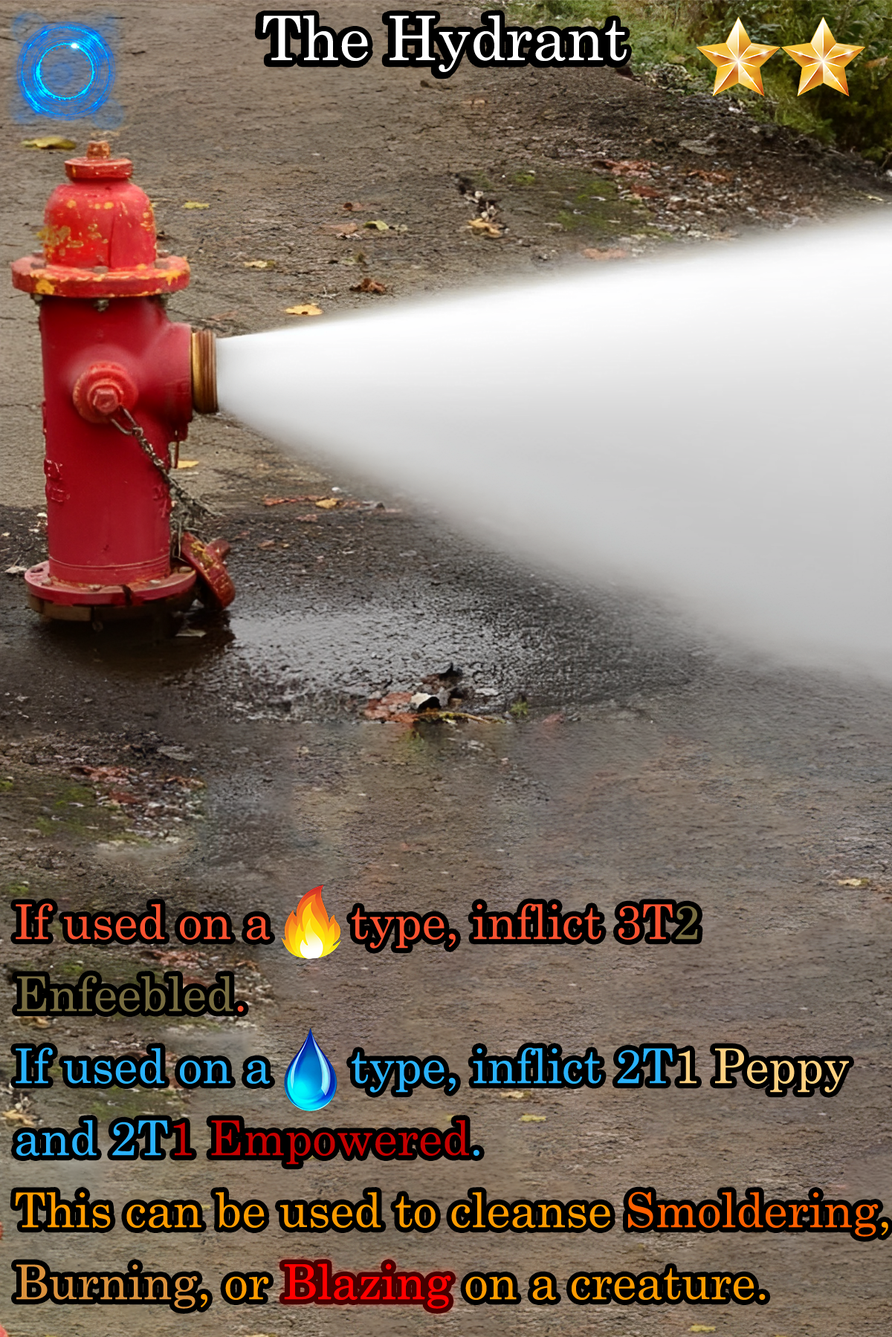
<style>
.page{position:relative;width:892px;height:1337px}
.page>*{position:absolute;margin:0}
.t1{font:104.8px "Century";color:#ffffff}
.t2{font:81.7px/72.1px "Century";color:#fb5230}
.t3{font:81.7px/72.1px "Century";color:#776c40}
.t4{font:81.7px/72.1px "Century";color:#29b2fb}
.t5{font:81.7px/72.1px "Century";color:#fed181}
.t6{font:81.7px/72.1px "Century";color:#c50000}
.t7{font:81.7px/72.1px "Century";color:#ff9c00}
.t8{font:81.7px/72.1px "Century";color:#ff6000}
.t9{font:81.7px/72.1px "Century";color:#db923d}
.t10{font:81.7px/72.1px "Century";color:#ff0000}
.t11{font:81.7px "Century";color:#ff0000}
</style>
<div class="page">
<p class="t1" style="left:262px;top:15px;width:364px;height:57px">The Hydrant</p>
<p class="t2" style="left:15px;top:903px;width:873px;height:406px">If used on a      type, inflict 3T<span class="t3">2 Enfeebled</span>.<br><span class="t4">If used on a      type, inflict 2T</span><span class="t5">1 Peppy </span><span class="t4">and 2T</span><span class="t6">1 Empowered</span><span class="t4">.<br></span><span class="t7">This can be used to cleanse </span><span class="t8">Smoldering</span><span class="t7">, </span><span class="t9">Burning</span><span class="t7">, or </span><span class="t10">Blazing</span><span class="t7"> on a creature.</span></p>
<p class="t11" style="left:285px;top:1264px;width:166px;height:44px">Blazing</p>
</div>
